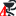
<style>
.page{position:relative;width:16px;height:16px;background:#ffffff}
.page>*{position:absolute;margin:0}
.t1{font:16px "Baskerville-Italic";color:#ff0000;font-weight:bold;scale:0.85 1}
</style>
<div class="page">
<p class="t1" style="left:0px;top:5px;width:7px;height:12px">А</p>
</div>
